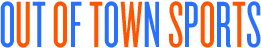
<style>
.page{position:relative;width:261px;height:48px;background:#ffffff}
.page>*{position:absolute;margin:0}
.t1{font:67.8px "Knockout-HTF26-JuniorFlyweight";letter-spacing:0.005em;color:#2a70ff}
.t2{font:67.8px "Knockout-HTF26-JuniorFlyweight";letter-spacing:0.005em;color:#ff5400}
</style>
<div class="page">
<p class="t1" style="left:0px;top:1px;width:261px;height:47px">O<span class="t2">U</span>T <span class="t2">O</span>F <span class="t2">T</span>O<span class="t2">W</span>N <span class="t2">S</span>P<span class="t2">O</span>R<span class="t2">T</span>S</p>
</div>
